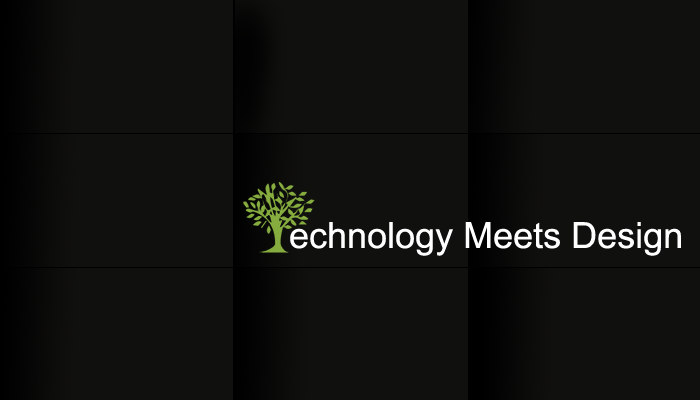
<style>
.page{position:relative;width:700px;height:400px;background:#10100e}
.page>*{position:absolute;margin:0}
.t1{font:36px "ArialMT";color:#ffffff}
</style>
<div class="page">
<p class="t1" style="left:290px;top:222px;width:391px;height:34px">echnology Meets Design</p>
</div>
